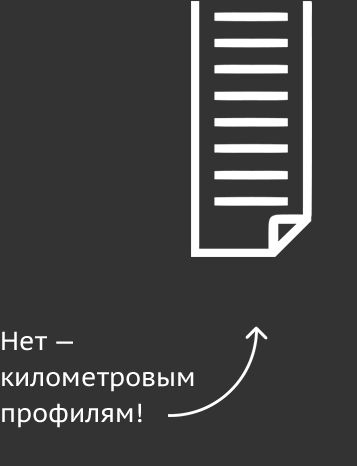
<style>
.page{position:relative;width:357px;height:466px;background:#333333}
.page>*{position:absolute;margin:0}
.t1{font:26px/36px "PTSans-Caption";color:#ffffff}
</style>
<div class="page">
<p class="t1" style="left:2px;top:331px;width:192px;height:97px">Нет —<br>километровым<br>профилям!</p>
</div>
